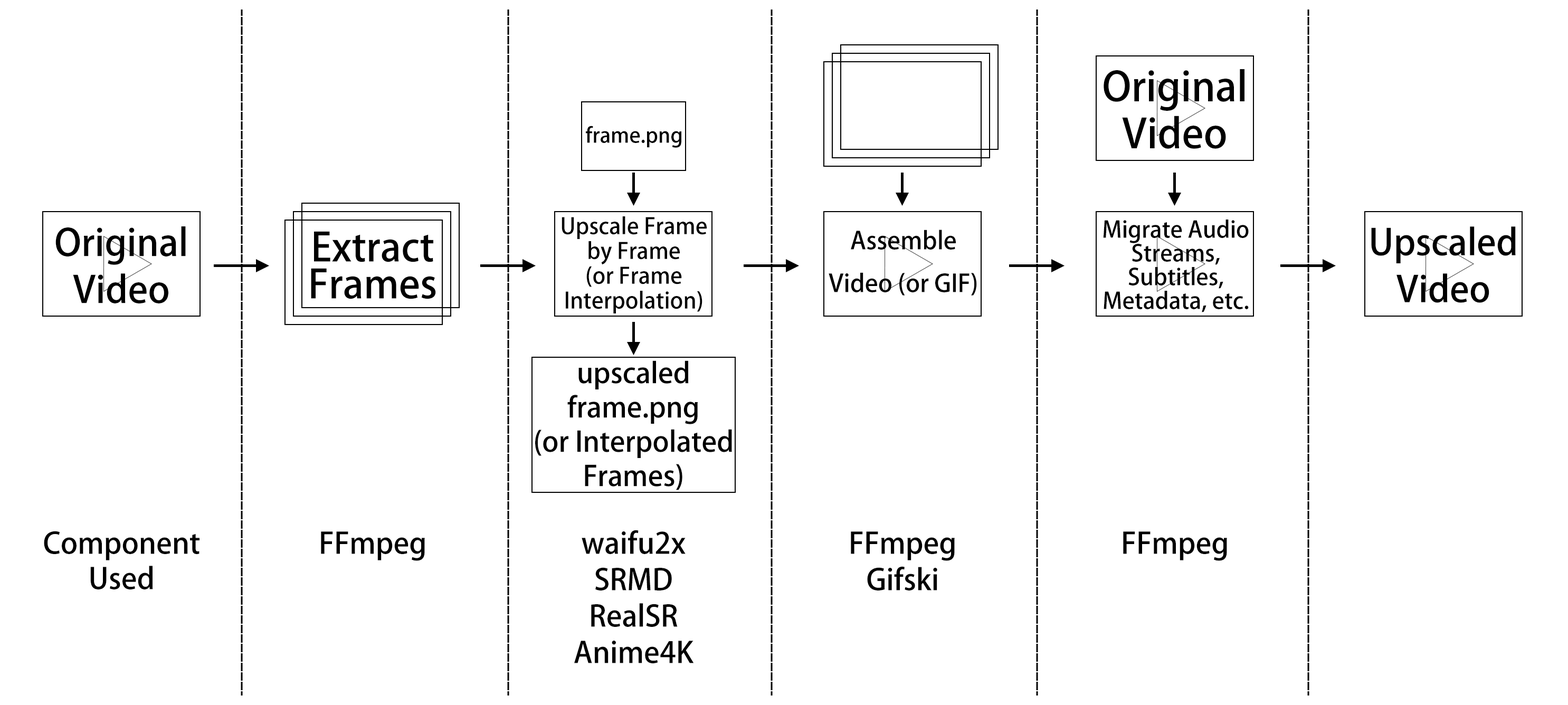
<style>
.page{position:relative;width:1568px;height:705px;background:#ffffff}
.page>*{position:absolute;margin:0}
.t1{font:40.1px/47px "AdobeHeitiStd-Regular";color:#000000}
.t2{font:20.6px "AdobeHeitiStd-Regular";color:#000000}
.t3{font:22.2px/24.8px "AdobeHeitiStd-Regular";color:#000000}
.t4{font:22.7px/23.7px "AdobeHeitiStd-Regular";color:#000000}
.t5{font:36.9px/47px "AdobeHeitiStd-Regular";color:#000000}
.t6{font:39.1px/36.9px "AdobeHeitiStd-Regular";color:#000000}
.t7{font:24.3px/42.7px "AdobeHeitiStd-Regular";color:#000000}
.t8{font:35.9px/47px "AdobeHeitiStd-Regular";color:#000000}
.t9{font:28px/34.3px "AdobeHeitiStd-Regular";color:#000000}
.t10{font:29px/35.4px "AdobeHeitiStd-Regular";color:#000000}
.t11{font:29px "AdobeHeitiStd-Regular";color:#000000}
.t12{font:29px/36.4px "AdobeHeitiStd-Regular";color:#000000}
</style>
<div class="page">
<p class="t1" style="left:1104px;top:69px;width:140px;height:80px;text-align:center">Original Video</p>
<p class="t2" style="left:586px;top:126px;width:96px;height:22px">frame.png</p>
<p class="t3" style="left:562px;top:216px;width:145px;height:97px;text-align:center">Upscale Frame by Frame<br>(or Frame Interpolation)</p>
<p class="t4" style="left:1103px;top:220px;width:146px;height:92px;text-align:center">Migrate Audio Streams, Subtitles, Metadata, etc.</p>
<p class="t5" style="left:55px;top:226px;width:131px;height:77px;text-align:center">Original Video</p>
<p class="t6" style="left:311px;top:231px;width:125px;height:68px;text-align:center">Extract Frames</p>
<p class="t7" style="left:829px;top:230px;width:148px;height:66px;text-align:center">Assemble Video (or GIF)</p>
<p class="t8" style="left:1371px;top:226px;width:145px;height:77px;text-align:center">Upscaled Video</p>
<p class="t9" style="left:535px;top:360px;width:197px;height:130px;text-align:center">upscaled frame.png<br>(or Interpolated Frames)</p>
<p class="t10" style="left:44px;top:531px;width:155px;height:59px;text-align:center">Component Used</p>
<p class="t11" style="left:321px;top:531px;width:104px;height:30px">FFmpeg</p>
<p class="t12" style="left:574px;top:530px;width:120px;height:133px;text-align:center">waifu2x<br>SRMD<br>RealSR<br>Anime4K</p>
<p class="t12" style="left:851px;top:531px;width:104px;height:60px;text-align:center">FFmpeg<br>Gifski</p>
<p class="t11" style="left:1123px;top:531px;width:104px;height:30px">FFmpeg</p>
</div>
